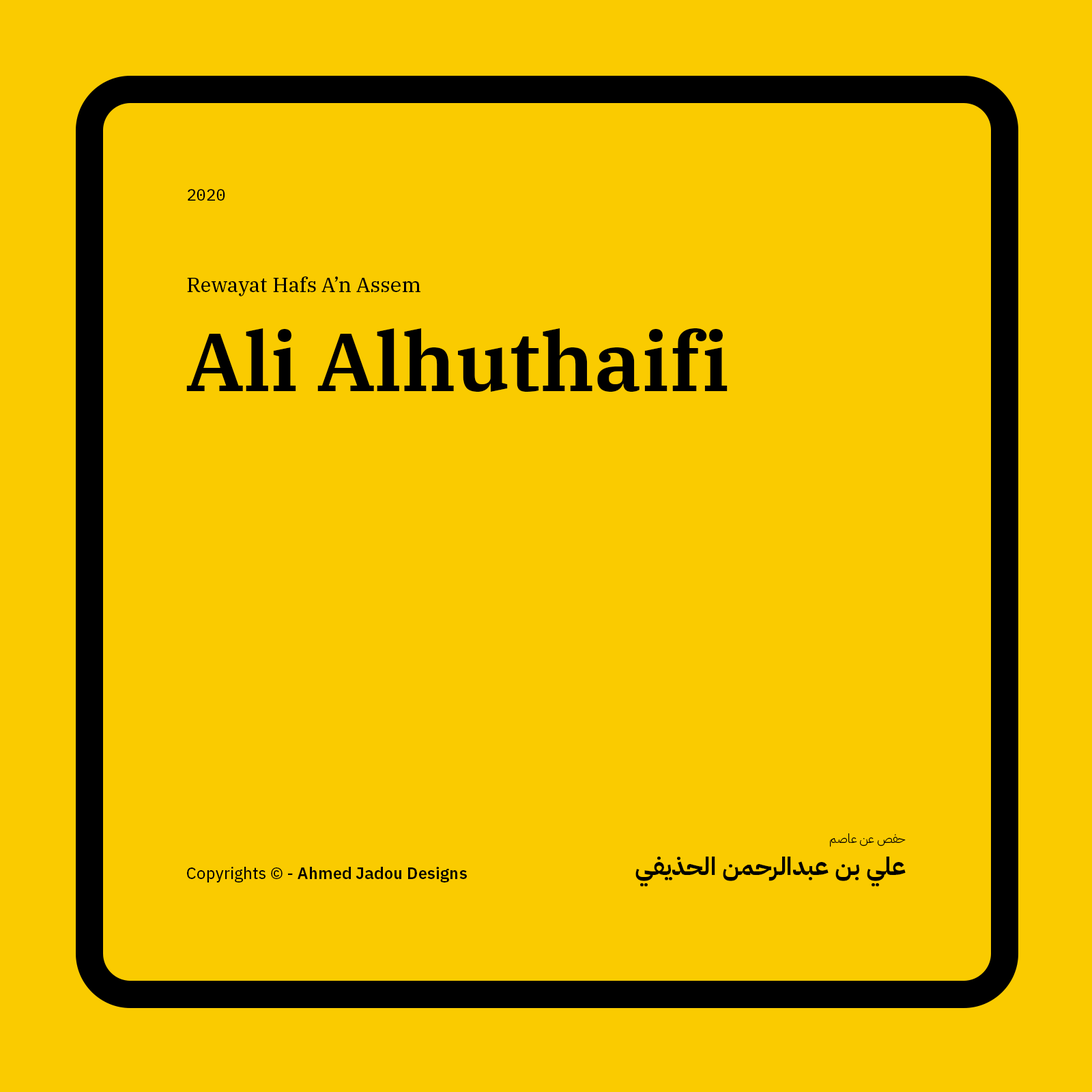
<style>
.page{position:relative;width:1092px;height:1092px;background:#facb00}
.page>*{position:absolute;margin:0}
.t1{font:16.4px "IBMPlexMono-Text";color:#000000}
.t2{font:20.5px "IBMPlexSerif-Text";color:#000000}
.t3{font:81.9px "IBMPlexSerif-SemiBold";color:#000000}
.t4{font:12.3px "IBMPlexArabic-Light";color:#000000}
.t5{font:24.6px "IBMPlexArabic-Bold";color:#000000}
.t6{font:16.4px "IBMPlexSans-SemiBold";color:#000000}
.t7{font:16.4px "IBMPlexSans-Text";color:#000000}
</style>
<div class="page">
<p class="t1" style="left:188px;top:189px;width:37px;height:12px">2020</p>
<p class="t2" style="left:187px;top:276px;width:233px;height:20px">Rewayat Hafs A’n Assem</p>
<p class="t3" style="left:186px;top:328px;width:542px;height:64px">Ali Alhuthaifi</p>
<p class="t4" style="left:830px;top:833px;width:76px;height:14px">حفص عن عاصم</p>
<p class="t5" style="left:635px;top:857px;width:271px;height:30px">علي بن عبدالرحمن الحذيفي</p>
<p class="t6" style="left:187px;top:867px;width:280px;height:15px"><span class="t7">Copyrights © - </span>Ahmed Jadou Designs</p>
</div>
